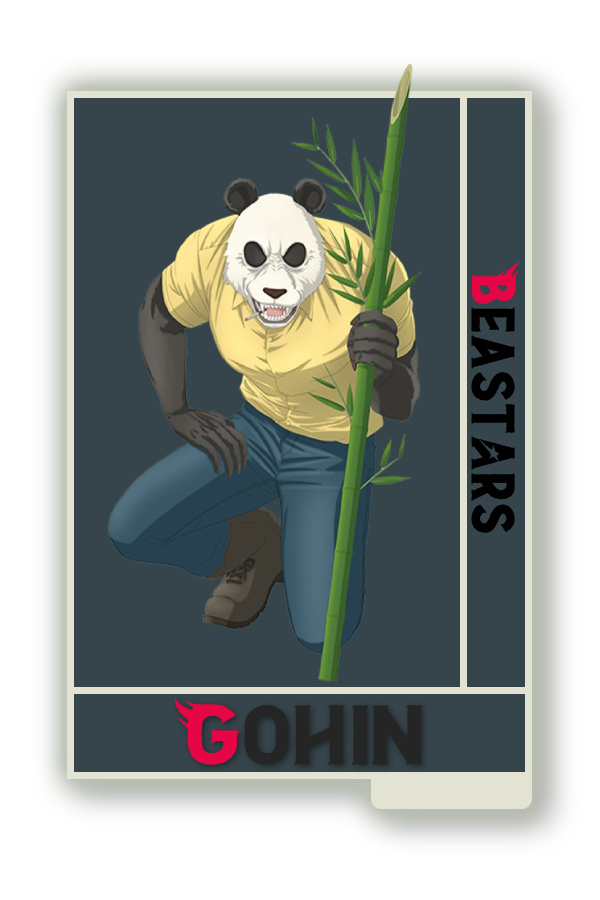
<style>
.page{position:relative;width:600px;height:900px;background:#36454b}
.page>*{position:absolute;margin:0}
.t1{font:48.8px "BEAST";color:#000000}
.t2{font:48.8px "BEAST";color:#e60646}
.t3{font:67px "BEAST";color:#252525;scale:1.12 1}
.t4{font:67px "BEAST";color:#e60646;scale:1.12 1}
</style>
<div class="page">
<p class="t1" style="left:471px;top:262px;width:50px;height:271px;rotate:90deg"><span class="t2">B</span>east@rs</p>
<p class="t3" style="left:174px;top:698px;width:249px;height:67px"><span class="t4">G</span>ohin</p>
</div>
